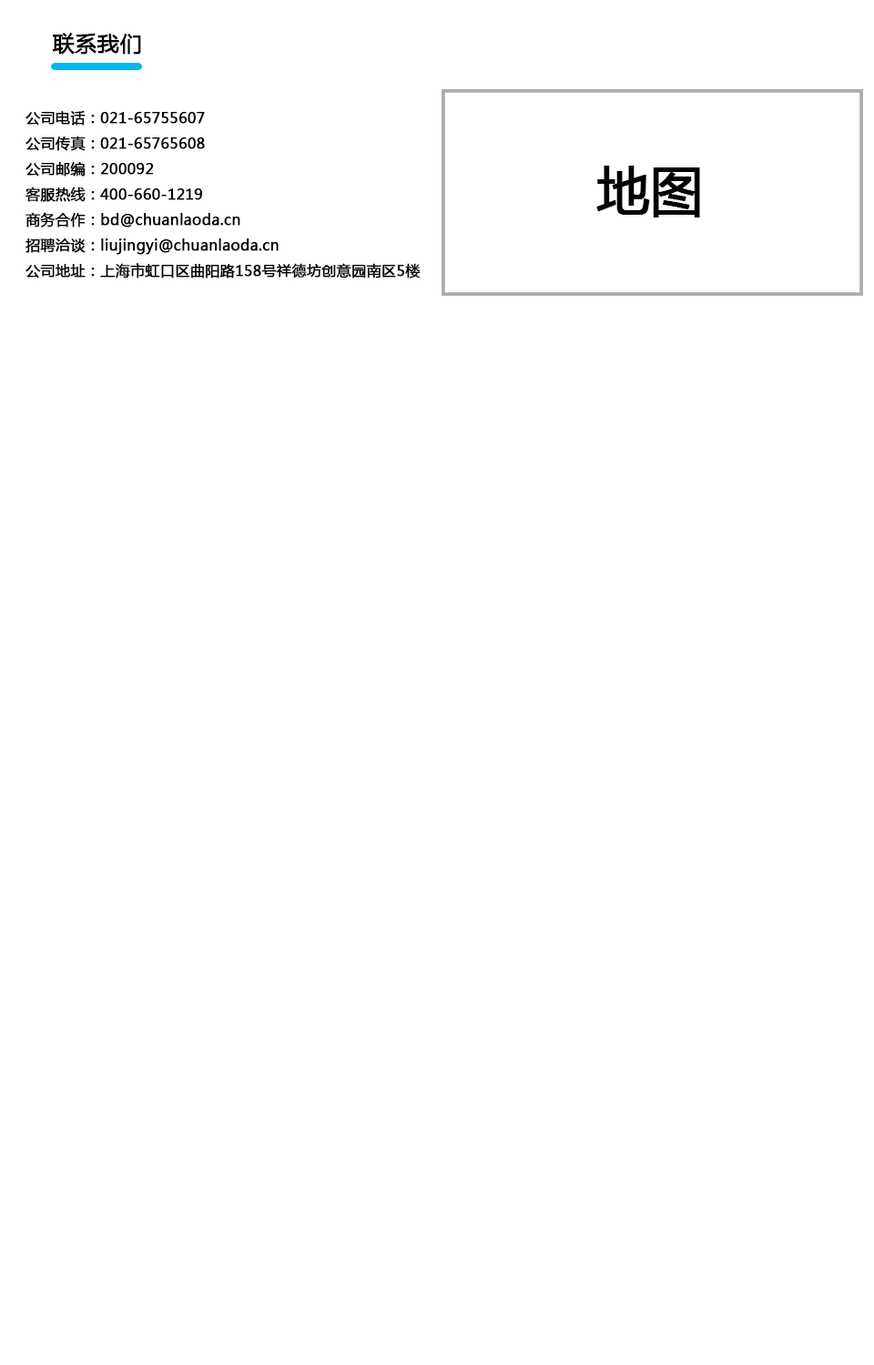
<style>
.page{position:relative;width:874px;height:1365px;background:#ffffff}
.page>*{position:absolute;margin:0}
.t1{font:21.8px "MicrosoftYaHei";color:#020202;font-weight:bold}
.t2{font:14.6px "MicrosoftYaHei";color:#020202;font-weight:bold}
.t3{font:52.3px "MicrosoftYaHei";color:#020202;font-weight:bold}
</style>
<div class="page">
<p class="t1" style="left:52px;top:33px;width:89px;height:22px">联系我们</p>
<p class="t2" style="left:25px;top:111px;width:395px;height:167px">公司电话：021-65755607<br>公司传真：021-65765608<br>公司邮编：200092<br>客服热线：400-660-1219<br>商务合作：bd@chuanlaoda.cn<br>招聘洽谈：liujingyi@chuanlaoda.cn<br>公司地址：上海市虹口区曲阳路158号祥德坊创意园南区5楼</p>
<p class="t3" style="left:596px;top:166px;width:104px;height:51px">地图</p>
</div>
